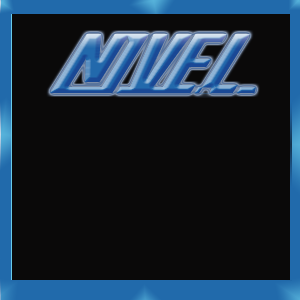
<style>
.page{position:relative;width:300px;height:300px;background:#0a0909}
.page>*{position:absolute;margin:0}
.t1{font:68.9px "RadiumCorp";scale:1.58 1}
</style>
<div class="page">
<p class="t1" style="left:50px;top:34px;width:206px;height:60px">NIVEL</p>
</div>
